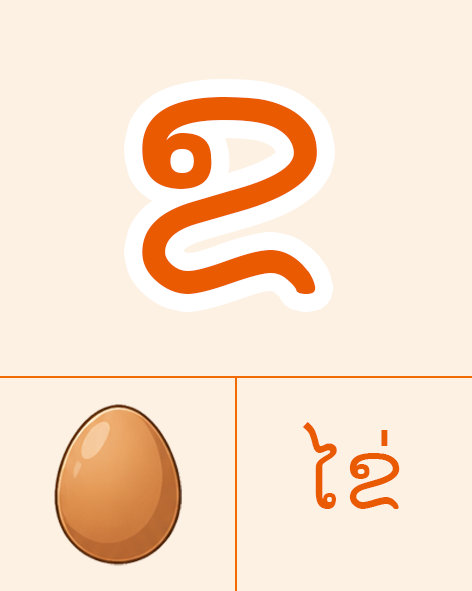
<style>
.page{position:relative;width:472px;height:591px;background:#fdf1e4}
.page>*{position:absolute;margin:0}
.t1{font:354.2px "Phetsarath-Regular";letter-spacing:0.04em;color:#ea5b01}
.t2{font:100px "Phetsarath-Regular";letter-spacing:0.04em;color:#ea5b01}
</style>
<div class="page">
<p class="t1" style="left:142px;top:97px;width:175px;height:197px">ຂ</p>
<p class="t2" style="left:302px;top:422px;width:98px;height:87px">ໄຂ່</p>
</div>
